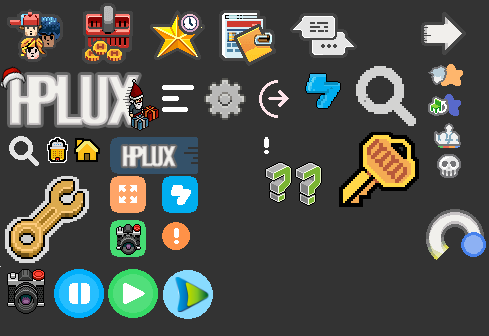
<style>
.page{position:relative;width:489px;height:336px;background:#333333}
.page>*{position:absolute;margin:0}
.t1{font:21.1px "Gobold";letter-spacing:-0.1em;color:#f1f0ec;font-weight:bold;scale:1.27 1}
.t2{font:21.1px "Gobold";letter-spacing:-0.24em;color:#f1f0ec;font-weight:bold;scale:1.27 1}
</style>
<div class="page">
<p class="t1" style="left:122px;top:146px;width:54px;height:21px"><span class="t2">H</span>PLUX</p>
<p class="t1" style="left:122px;top:146px;width:54px;height:21px"><span class="t2">H</span>PLUX</p>
</div>
